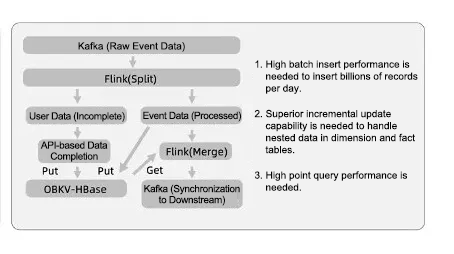
<style>
.page{position:relative;width:454px;height:254px;background:#f2f2f2}
.page>*{position:absolute;margin:0}
.t1{font:10px "ArialMT";color:#040404}
.t2{font:10px/12px "ArialMT";color:#040404}
.t3{font:10px "ArialMT";letter-spacing:-0.035em;color:#040404}
.t4{font:10px/11px "ArialMT";letter-spacing:-0.03em;color:#040404}
</style>
<div class="page">
<p class="t1" style="left:78px;top:42px;width:107px;height:10px">Kafka (Raw Event Data)</p>
<p class="t2" style="left:254px;top:60px;width:164px;height:131px">1. High batch insert performance is needed to insert billions of records per day.<br>2. Superior incremental update capability is needed to handle nested data in dimension and fact tables.<br>3. High point query performance is needed.</p>
<p class="t3" style="left:29px;top:112px;width:96px;height:10px">User Data (Incomplete)</p>
<p class="t3" style="left:143px;top:111px;width:99px;height:11px">Event Data (Processed)</p>
<p class="t4" style="left:40px;top:141px;width:68px;height:21px;text-align:center">API-based Data Completion</p>
<p class="t4" style="left:144px;top:184px;width:96px;height:22px;text-align:center">Kafka (Synchronization to Downstream)</p>
</div>
